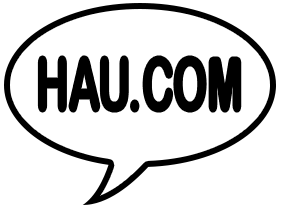
<style>
.page{position:relative;width:281px;height:208px;background:#ffffff}
.page>*{position:absolute;margin:0}
.t1{font:73.1px "ArialRoundedMTBold";color:#000000;scale:0.59 1}
</style>
<div class="page">
<p class="t1" style="left:39px;top:57px;width:201px;height:54px">HAU.COM</p>
</div>
